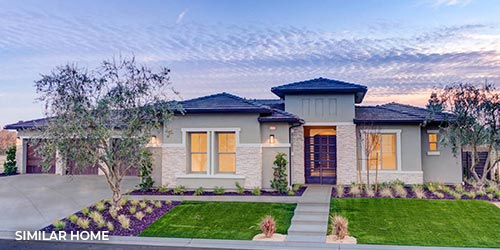
<style>
.page{position:relative;width:500px;height:250px}
.page>*{position:absolute;margin:0}
.t1{font:12px "Montserrat-SemiBold";color:#ffffff}
</style>
<div class="page">
<p class="t1" style="left:15px;top:231px;width:94px;height:9px">SIMILAR HOME</p>
</div>
